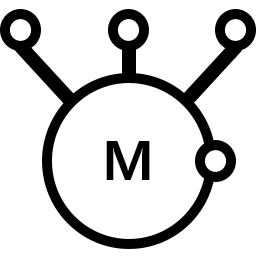
<style>
.page{position:relative;width:256px;height:256px;background:#ffffff}
.page>*{position:absolute;margin:0}
.t1{font:54.2px "MalgunGothicBold";color:#000000}
</style>
<div class="page">
<p class="t1" style="left:106px;top:141px;width:44px;height:39px">M</p>
</div>
